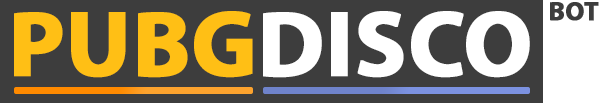
<style>
.page{position:relative;width:599px;height:103px;background:#3d3d3d}
.page>*{position:absolute;margin:0}
.t1{font:26.3px "MyriadPro-Bold";color:#ffffff;font-weight:bold}
.t2{font:94px "MyriadPro-Bold";color:#ffc015;font-weight:bold}
.t3{font:94px "MyriadPro-Bold";color:#ffffff;font-weight:bold}
</style>
<div class="page">
<p class="t1" style="left:550px;top:2px;width:49px;height:19px">BOT</p>
<p class="t2" style="left:14px;top:11px;width:239px;height:67px">PUBG</p>
<p class="t3" style="left:263px;top:11px;width:267px;height:67px">DISCO</p>
</div>
